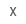
<style>
.page{position:relative;width:26px;height:24px;background:#ffffff}
.page>*{position:absolute;margin:0}
.t1{font:12px "MyriadHebrew-Regular";color:#626262}
</style>
<div class="page">
<p class="t1" style="left:10px;top:7px;width:7px;height:9px">X</p>
</div>
